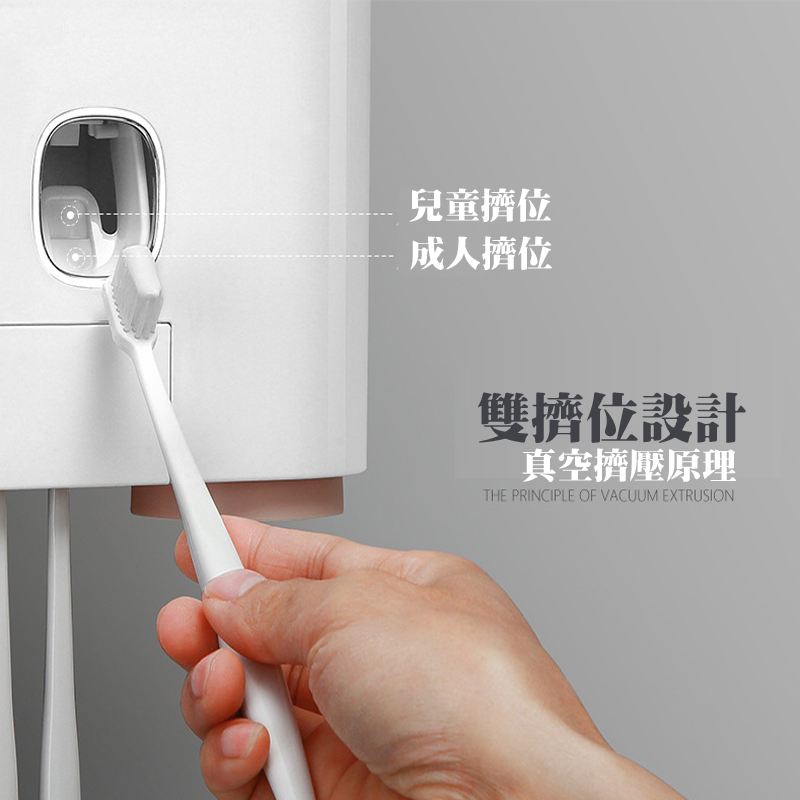
<style>
.page{position:relative;width:800px;height:800px}
.page>*{position:absolute;margin:0}
.t1{font:36px "HanWangMingBlack";color:#ffffff}
.t2{font:54.4px "HanWangMingBlack";color:#414247}
</style>
<div class="page">
<p class="t1" style="left:409px;top:188px;width:142px;height:34px">兒童擠位</p>
<p class="t1" style="left:410px;top:236px;width:142px;height:34px">成人擠位</p>
<p class="t2" style="left:478px;top:392px;width:268px;height:51px">雙擠位設計</p>
<p class="t1" style="left:522px;top:448px;width:214px;height:34px">真空擠壓原理</p>
</div>
